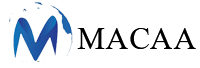
<style>
.page{position:relative;width:200px;height:68px;background:#ffffff}
.page>*{position:absolute;margin:0}
.t1{font:31.2px "TimesNewRomanPSMT";color:#000000}
</style>
<div class="page">
<p class="t1" style="left:77px;top:28px;width:119px;height:21px">MACAA</p>
</div>
